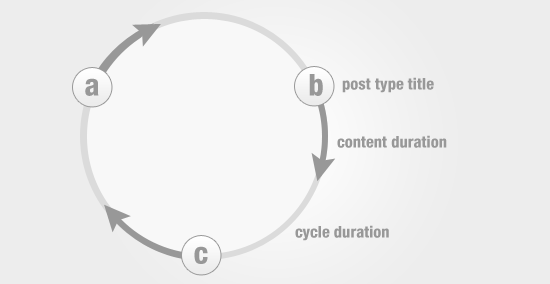
<style>
.page{position:relative;width:550px;height:284px;background:#ededed}
.page>*{position:absolute;margin:0}
.t1{font:30px "HelveticaNeueLTStd-HvCn";color:#989898}
.t2{font:16px "HelveticaNeueLTStd-HvCn";color:#989898}
</style>
<div class="page">
<p class="t1" style="left:85px;top:78px;width:14px;height:18px">a</p>
<p class="t1" style="left:309px;top:74px;width:14px;height:22px">b</p>
<p class="t2" style="left:342px;top:77px;width:92px;height:16px">post type title</p>
<p class="t2" style="left:337px;top:135px;width:110px;height:13px">content duration</p>
<p class="t2" style="left:295px;top:225px;width:94px;height:16px">cycle duration</p>
<p class="t1" style="left:194px;top:246px;width:14px;height:18px">c</p>
</div>
